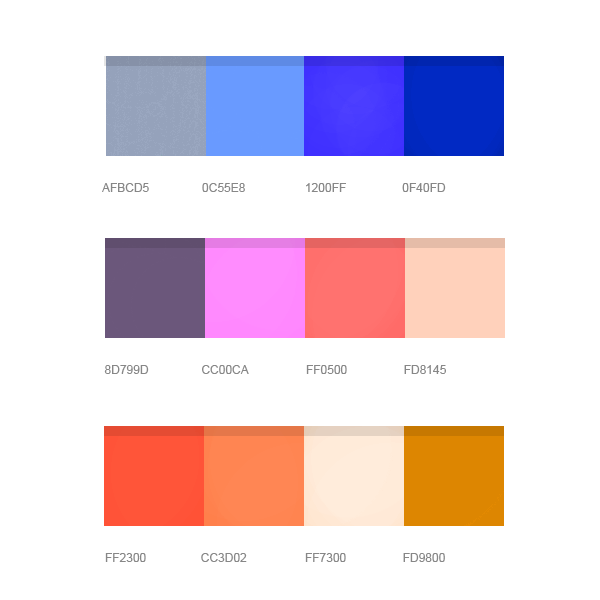
<style>
.page{position:relative;width:600px;height:600px;background:#ffffff}
.page>*{position:absolute;margin:0}
.t1{font:12px "ArialMT";color:#878787;text-transform:uppercase}
</style>
<div class="page">
<p class="t1" style="left:102px;top:183px;width:47px;height:9px">afbcd5</p>
<p class="t1" style="left:202px;top:183px;width:43px;height:9px">0C55E8</p>
<p class="t1" style="left:306px;top:183px;width:40px;height:9px">1200FF</p>
<p class="t1" style="left:402px;top:183px;width:44px;height:9px">0F40FD</p>
<p class="t1" style="left:104px;top:365px;width:45px;height:9px">8d799d</p>
<p class="t1" style="left:202px;top:365px;width:47px;height:9px">CC00CA</p>
<p class="t1" style="left:306px;top:365px;width:41px;height:9px">FF0500</p>
<p class="t1" style="left:404px;top:365px;width:42px;height:9px">FD8145</p>
<p class="t1" style="left:105px;top:553px;width:41px;height:9px">FF2300</p>
<p class="t1" style="left:201px;top:553px;width:46px;height:9px">CC3D02</p>
<p class="t1" style="left:305px;top:553px;width:41px;height:9px">FF7300</p>
<p class="t1" style="left:403px;top:553px;width:42px;height:9px">FD9800</p>
</div>
